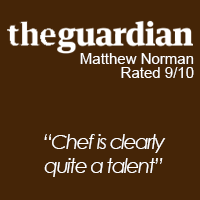
<style>
.page{position:relative;width:200px;height:200px;background:#452507}
.page>*{position:absolute;margin:0}
.t1{font:15px/14px "ArialMT";color:#ffffff}
.t2{font:20px "CenturyGothic-Italic";letter-spacing:-0.075em;color:#ffffff}
</style>
<div class="page">
<p class="t1" style="left:80px;top:53px;width:114px;height:25px;text-align:right">Matthew Norman<br>Rated 9/10</p>
<p class="t2" style="left:44px;top:134px;width:122px;height:43px;text-align:center">“Chef is clearly<br>quite a talent”</p>
</div>
